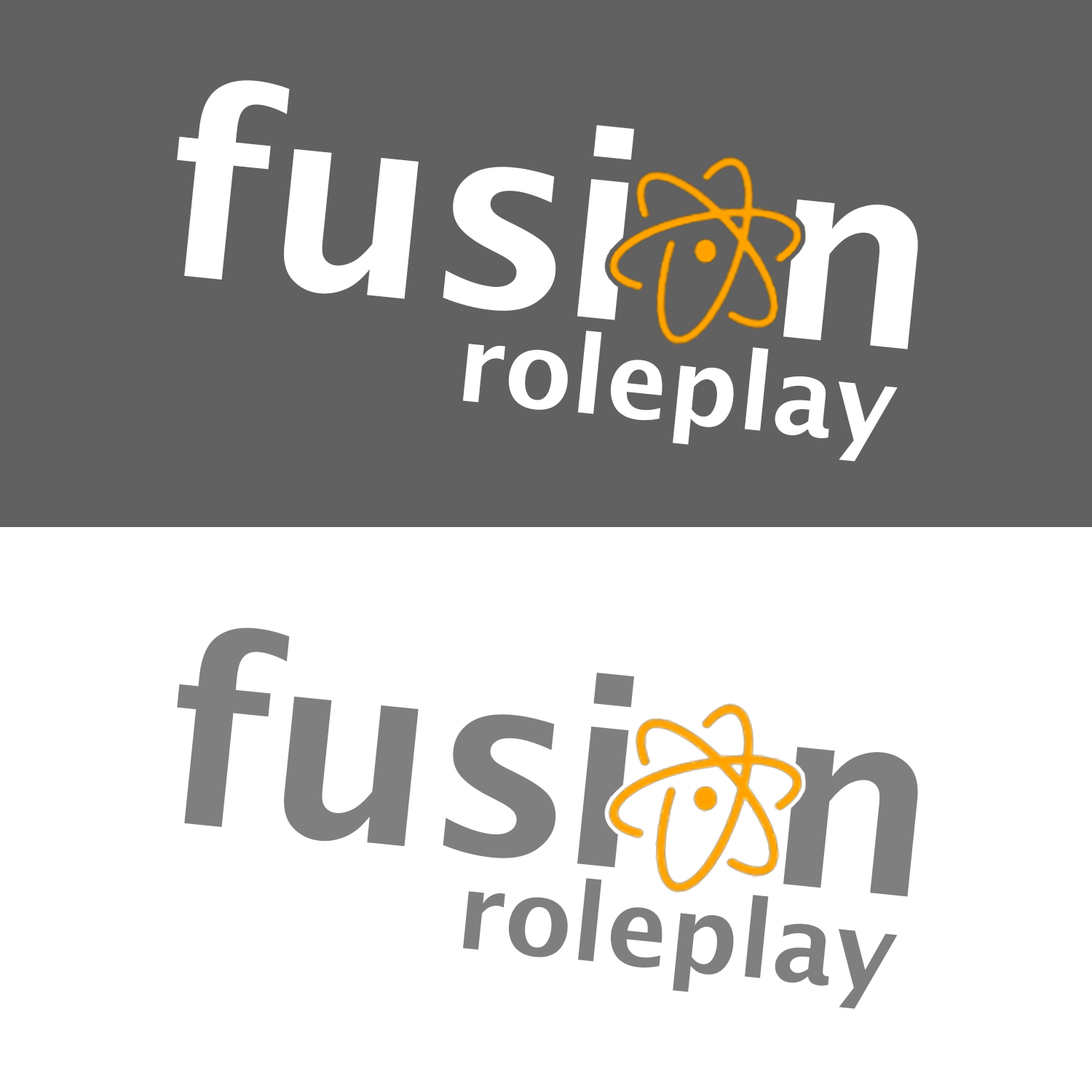
<style>
.page{position:relative;width:1092px;height:1092px;background:#ffffff}
.page>*{position:absolute;margin:0}
.t1{font:256.8px "LucidaSans-Demi";letter-spacing:-0.055em;color:#ffffff}
.t2{font:256.8px "LucidaSans-Demi";letter-spacing:-0.02em;color:#ffffff}
.t3{font:106.3px "LucidaSans-Demi";color:#ffffff}
.t4{font:256.8px "LucidaSans-Demi";letter-spacing:-0.055em;color:#7f7f7f}
.t5{font:256.8px "LucidaSans-Demi";letter-spacing:-0.02em;color:#7f7f7f}
.t6{font:106.3px "LucidaSans-Demi";color:#7f7f7f}
</style>
<div class="page">
<p class="t1" style="left:177px;top:80px;width:741px;height:269px;rotate:6deg"><span class="t2">fu</span>si  n</p>
<p class="t3" style="left:463px;top:331px;width:435px;height:131px;rotate:6deg">roleplay</p>
<p class="t4" style="left:177px;top:628px;width:741px;height:269px;rotate:6deg"><span class="t5">fu</span>si  n</p>
<p class="t6" style="left:463px;top:878px;width:435px;height:131px;rotate:6deg">roleplay</p>
</div>
